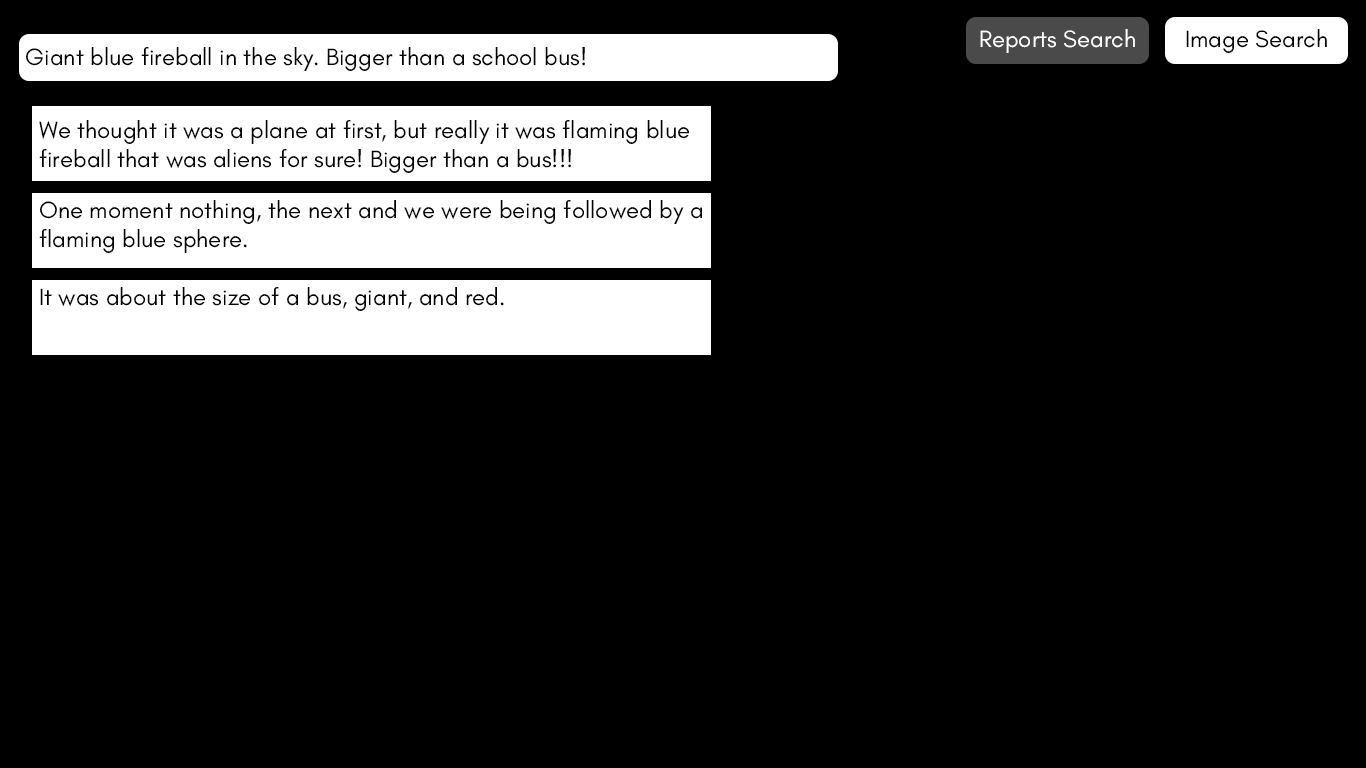
<style>
.page{position:relative;width:1366px;height:768px;background:#000000}
.page>*{position:absolute;margin:0}
.t1{font:24px "GlacialIndifference-Regular";color:#ffffff}
.t2{font:24px "GlacialIndifference-Regular";color:#000000}
</style>
<div class="page">
<p class="t1" style="left:980px;top:29px;width:155px;height:24px">Reports Search</p>
<p class="t2" style="left:1186px;top:29px;width:141px;height:24px">Image Search</p>
<p class="t2" style="left:26px;top:47px;width:559px;height:24px">Giant blue fireball in the sky. Bigger than a school bus!</p>
<p class="t2" style="left:39px;top:120px;width:650px;height:53px">We thought it was a plane at first, but really it was flaming blue fireball that was aliens for sure! Bigger than a bus!!!</p>
<p class="t2" style="left:39px;top:200px;width:663px;height:53px">One moment nothing, the next and we were being followed by a flaming blue sphere.</p>
<p class="t2" style="left:40px;top:287px;width:464px;height:24px">It was about the size of a bus, giant, and red.</p>
</div>
